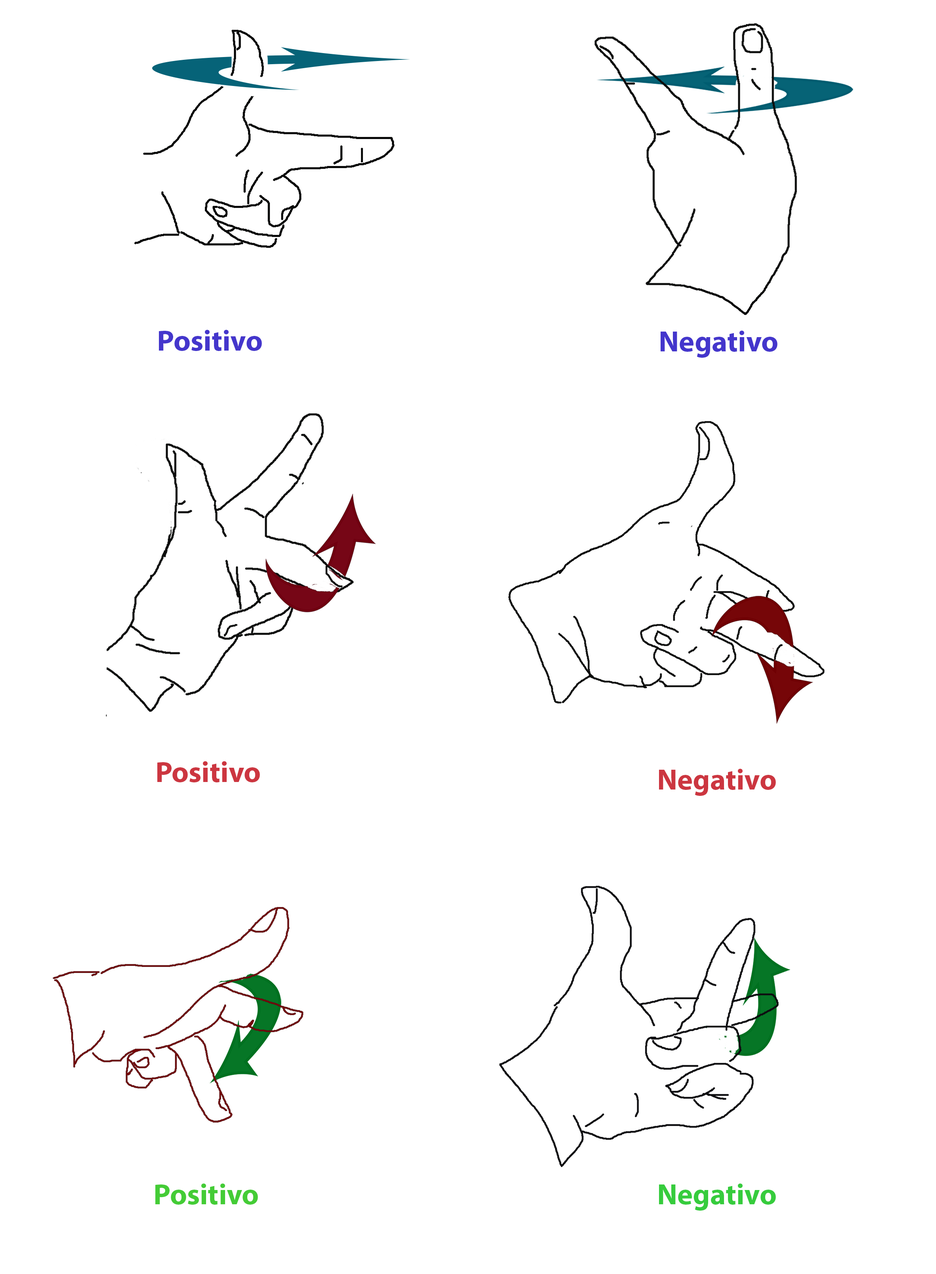
<style>
.page{position:relative;width:936px;height:1274px;background:#ffffff}
.page>*{position:absolute;margin:0}
.t1{font:29.5px "MyriadPro-Bold";color:#4436cc}
.t2{font:29.5px "MyriadPro-Bold";color:#cc3640}
.t3{font:29.5px "MyriadPro-Bold";color:#44cc36}
.t4{font:29.5px "MyriadPro-Bold";color:#36cc3d}
</style>
<div class="page">
<p class="t1" style="left:159px;top:330px;width:103px;height:21px">Positivo</p>
<p class="t1" style="left:660px;top:330px;width:117px;height:28px">Negativo</p>
<p class="t2" style="left:157px;top:761px;width:103px;height:22px">Positivo</p>
<p class="t2" style="left:659px;top:769px;width:117px;height:27px">Negativo</p>
<p class="t3" style="left:155px;top:1183px;width:103px;height:22px">Positivo</p>
<p class="t4" style="left:659px;top:1183px;width:117px;height:28px">Negativo</p>
</div>
